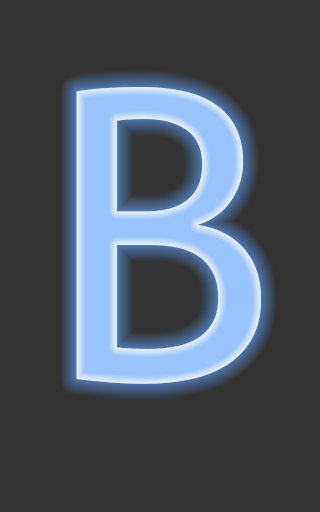
<style>
.page{position:relative;width:320px;height:512px;background:#333333}
.page>*{position:absolute;margin:0}
.t1{font:400px "Aller-Regular"}
</style>
<div class="page">
<p class="t1" style="left:76px;top:87px;width:185px;height:297px">B</p>
</div>
